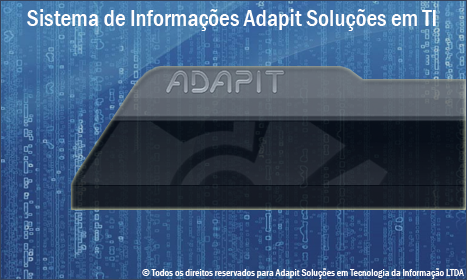
<style>
.page{position:relative;width:467px;height:280px}
.page>*{position:absolute;margin:0}
.t1{font:24px "FranklinGothic-MediumCond";color:#fffdfd}
.t2{font:10px "FranklinGothic-MediumCond";color:#fefbfa}
</style>
<div class="page">
<p class="t1" style="left:27px;top:9px;width:409px;height:22px">Sistema de Informações Adapit Soluções em TI</p>
<p class="t2" style="left:142px;top:268px;width:322px;height:11px">© Todos os direitos reservados para Adapit Soluções em Tecnologia da Informação LTDA</p>
</div>
